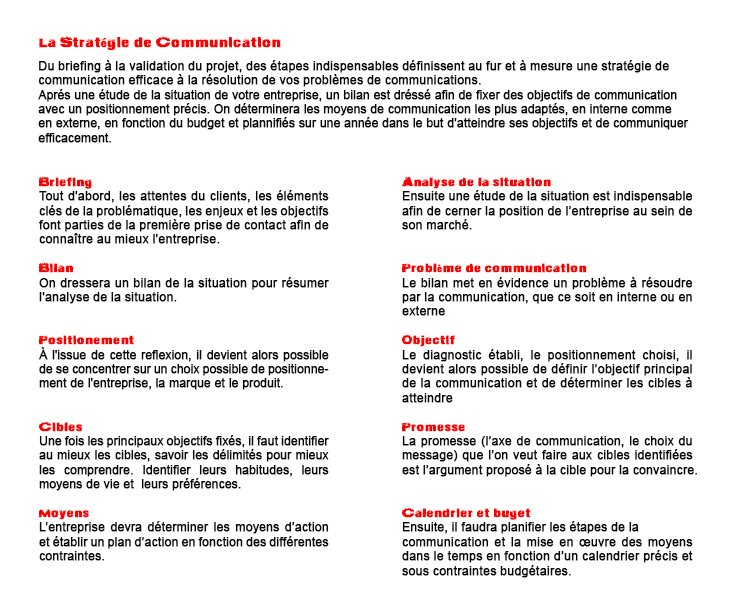
<style>
.page{position:relative;width:750px;height:600px;background:#ffffff}
.page>*{position:absolute;margin:0}
.t1{font:14px "ActionoftheTimeNew";color:#fc0000;font-weight:bold}
.t2{font:12px "ArialMT";color:#080808;font-weight:bold}
.t3{font:12px "ActionoftheTimeNew";color:#fc0000;font-weight:bold}
</style>
<div class="page">
<p class="t1" style="left:39px;top:36px;width:242px;height:14px">La Stratégie de Communication</p>
<p class="t2" style="left:38px;top:60px;width:651px;height:83px">Du briefing à la validation du projet, des étapes indispensables définissent au fur et à mesure une stratégie de communication efficace à la résolution de vos problèmes de communications. <br>Aprés une étude de la situation de votre entreprise, un bilan est dréssé afin de fixer des objectifs de communication avec un positionnement précis. On déterminera les moyens de communication les plus adaptés, en interne comme en externe, en fonction du budget et plannifiés sur une année dans le but d’atteindre ses objectifs et de communiquer efficacement.</p>
<p class="t2" style="left:39px;top:176px;width:290px;height:385px;text-align:justify"><span class="t3">Briefing<br></span>Tout d'abord, les attentes du clients, les éléments clés de la problématique, les enjeux et les objectifs font parties de la première prise de contact afin de connaître au mieux l'entreprise.<br><br><span class="t3">Bilan<br></span>On dressera un bilan de la situation pour résumer l'analyse de la situation.<br><br><br><span class="t3">Positionement<br></span>À l'issue de cette reflexion, il devient alors possible de se concentrer sur un choix possible de positionnement de l'entreprise, la marque et le produit.  <br><br><br><span class="t3">Cibles<br></span>Une fois les principaux objectifs fixés, il faut identifier au mieux les cibles, savoir les délimités pour mieux les comprendre. Identifier leurs habitudes, leurs moyens de vie et  leurs préférences. <br><br><span class="t3">Moyens<br></span>L’entreprise devra déterminer les moyens d’action et établir un plan d’action en fonction des différentes contraintes.</p>
<p class="t2" style="left:402px;top:177px;width:295px;height:401px;text-align:justify"><span class="t3">Analyse de la situation<br></span>Ensuite une étude de la situation est indispensable afin de cerner la position de l’entreprise au sein de son marché.<br><br><br><span class="t3">Problème de communication<br></span>Le bilan met en évidence un problème à résoudre par la communication, que ce soit en interne ou en externe<br><br><span class="t3">Objectif<br></span>Le diagnostic établi, le positionnement choisi, il devient alors possible de définir l’objectif principal de la communication et de déterminer les cibles à atteindre<br><br><span class="t3">Promesse<br></span>La promesse (l’axe de communication, le choix du message) que l’on veut faire aux cibles identifiées  est l’argument proposé à la cible pour la convaincre. <br><span class="t3"><br><br>Calendrier et buget<br></span>Ensuite, il faudra planifier les étapes de la <br>communication et la mise en œuvre des moyens dans le temps en fonction d’un calendrier précis et sous contraintes budgétaires.</p>
</div>
